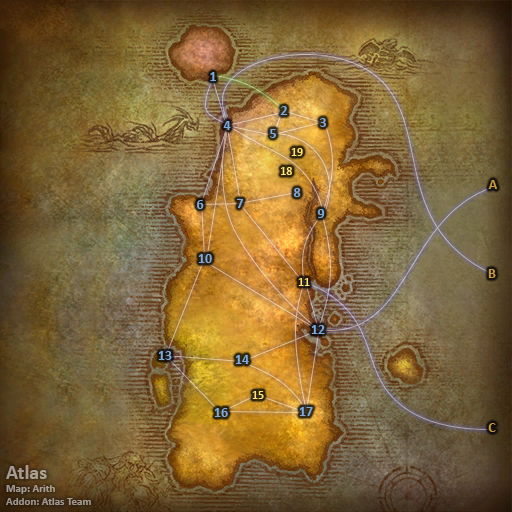
<style>
.page{position:relative;width:512px;height:512px}
.page>*{position:absolute;margin:0}
.t1{font:14px "Calibri-Bold";color:#7babe0}
.t2{font:12px "Calibri-Bold";color:#fee570}
.t3{font:14px "Calibri-Bold";color:#cc9933}
.t4{font:11px "Calibri-Bold";color:#a49b92}
.t5{font:20px "Calibri-Bold";color:#a49b92}
</style>
<div class="page">
<p class="t1" style="left:210px;top:72px;width:6px;height:9px">1</p>
<p class="t1" style="left:281px;top:106px;width:7px;height:9px">2</p>
<p class="t1" style="left:223px;top:121px;width:8px;height:9px">4</p>
<p class="t1" style="left:320px;top:118px;width:6px;height:9px">3</p>
<p class="t1" style="left:270px;top:129px;width:6px;height:9px">5</p>
<p class="t2" style="left:291px;top:148px;width:12px;height:8px">19</p>
<p class="t2" style="left:281px;top:167px;width:11px;height:8px">18</p>
<p class="t3" style="left:488px;top:180px;width:9px;height:9px">A</p>
<p class="t1" style="left:293px;top:188px;width:8px;height:9px">8</p>
<p class="t1" style="left:197px;top:200px;width:7px;height:9px">6</p>
<p class="t1" style="left:236px;top:199px;width:8px;height:9px">7</p>
<p class="t1" style="left:317px;top:209px;width:8px;height:9px">9</p>
<p class="t1" style="left:198px;top:254px;width:14px;height:9px">10</p>
<p class="t3" style="left:488px;top:269px;width:8px;height:9px">B</p>
<p class="t2" style="left:298px;top:278px;width:12px;height:8px">11</p>
<p class="t1" style="left:311px;top:325px;width:14px;height:9px">12</p>
<p class="t1" style="left:158px;top:351px;width:14px;height:9px">13</p>
<p class="t1" style="left:235px;top:355px;width:14px;height:9px">14</p>
<p class="t2" style="left:252px;top:391px;width:12px;height:8px">15</p>
<p class="t1" style="left:214px;top:408px;width:14px;height:9px">16</p>
<p class="t1" style="left:299px;top:407px;width:14px;height:9px">17</p>
<p class="t3" style="left:488px;top:423px;width:8px;height:9px">C</p>
<p class="t4" style="left:6px;top:465px;width:85px;height:40px"><span class="t5">Atlas<br></span>Map: Arith<br>Addon: Atlas Team</p>
</div>
